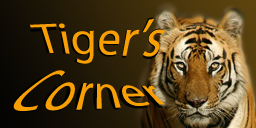
<style>
.page{position:relative;width:256px;height:128px}
.page>*{position:absolute;margin:0}
.t1{font:48px "MyriadPro-Regular"}
.t2{font:48px "MyriadPro-Regular";color:#f89f03}
</style>
<div class="page">
<p class="t1" style="left:30px;top:17px;width:135px;height:47px">Tiger’s</p>
<p class="t2" style="left:30px;top:19px;width:135px;height:45px">Tiger’s</p>
<p class="t2" style="left:13px;top:70px;width:152px;height:41px">Corner</p>
</div>
